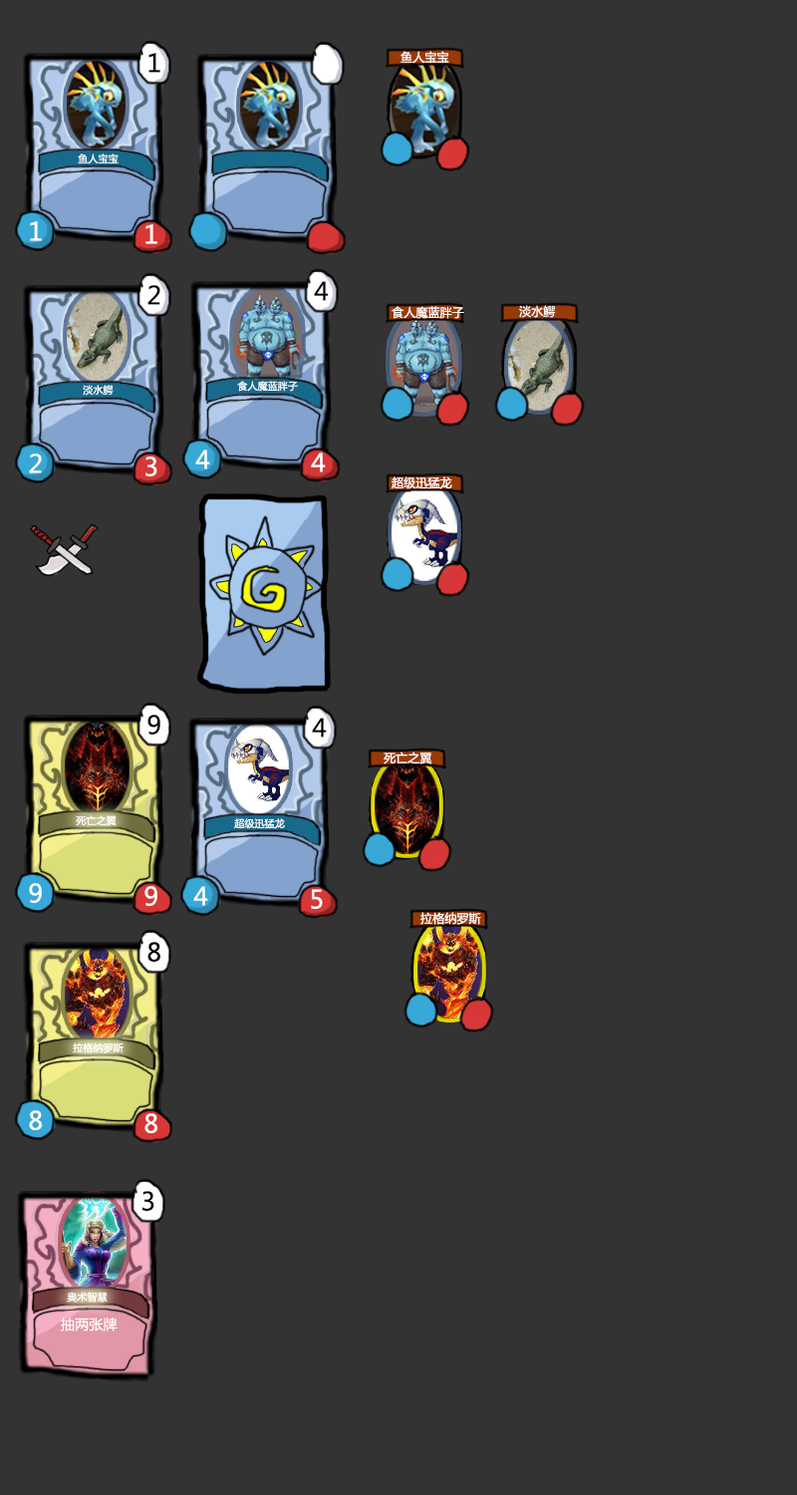
<style>
.page{position:relative;width:797px;height:1495px;background:#333333}
.page>*{position:absolute;margin:0}
.t1{font:24.9px "MicrosoftYaHei";letter-spacing:0.01em;color:#010101}
.t2{font:12px "MicrosoftYaHei";letter-spacing:0.01em;color:#fffffe}
.t3{font:10px "MicrosoftYaHei";letter-spacing:0.01em;color:#ffffff}
.t4{font:24.9px "MicrosoftYaHei";letter-spacing:0.01em;color:#ffffff}
.t5{font:14px "MicrosoftYaHei";letter-spacing:0.01em;color:#ffffff}
</style>
<div class="page">
<p class="t1" style="left:149px;top:53px;width:11px;height:20px">1</p>
<p class="t2" style="left:401px;top:51px;width:49px;height:13px">鱼人宝宝</p>
<p class="t3" style="left:78px;top:154px;width:41px;height:10px">鱼人宝宝</p>
<p class="t4" style="left:30px;top:221px;width:12px;height:20px">1</p>
<p class="t4" style="left:146px;top:224px;width:12px;height:20px">1</p>
<p class="t1" style="left:314px;top:281px;width:15px;height:20px">4</p>
<p class="t1" style="left:148px;top:285px;width:12px;height:20px">2</p>
<p class="t2" style="left:519px;top:305px;width:37px;height:13px">淡水鳄</p>
<p class="t2" style="left:392px;top:306px;width:73px;height:13px">食人魔蓝胖子</p>
<p class="t3" style="left:83px;top:385px;width:31px;height:11px">淡水鳄</p>
<p class="t3" style="left:237px;top:381px;width:61px;height:11px">食人魔蓝胖子</p>
<p class="t4" style="left:195px;top:450px;width:15px;height:20px">4</p>
<p class="t4" style="left:29px;top:454px;width:13px;height:19px">2</p>
<p class="t4" style="left:146px;top:457px;width:12px;height:19px">3</p>
<p class="t4" style="left:311px;top:453px;width:15px;height:20px">4</p>
<p class="t2" style="left:392px;top:476px;width:61px;height:13px">超级迅猛龙</p>
<p class="t1" style="left:148px;top:715px;width:12px;height:20px">9</p>
<p class="t1" style="left:312px;top:718px;width:15px;height:20px">4</p>
<p class="t2" style="left:384px;top:752px;width:49px;height:13px">死亡之翼</p>
<p class="t3" style="left:76px;top:815px;width:41px;height:11px">死亡之翼</p>
<p class="t3" style="left:234px;top:818px;width:51px;height:11px">超级迅猛龙</p>
<p class="t4" style="left:29px;top:883px;width:13px;height:20px">9</p>
<p class="t4" style="left:145px;top:886px;width:13px;height:20px">9</p>
<p class="t4" style="left:193px;top:886px;width:15px;height:20px">4</p>
<p class="t4" style="left:311px;top:889px;width:12px;height:20px">5</p>
<p class="t2" style="left:421px;top:912px;width:60px;height:13px">拉格纳罗斯</p>
<p class="t1" style="left:148px;top:942px;width:12px;height:20px">8</p>
<p class="t3" style="left:73px;top:1043px;width:51px;height:11px">拉格纳罗斯</p>
<p class="t4" style="left:29px;top:1110px;width:13px;height:20px">8</p>
<p class="t4" style="left:145px;top:1113px;width:13px;height:20px">8</p>
<p class="t1" style="left:143px;top:1191px;width:12px;height:20px">3</p>
<p class="t3" style="left:67px;top:1292px;width:41px;height:11px">奥术智慧</p>
<p class="t5" style="left:61px;top:1318px;width:57px;height:14px">抽两张牌</p>
</div>
